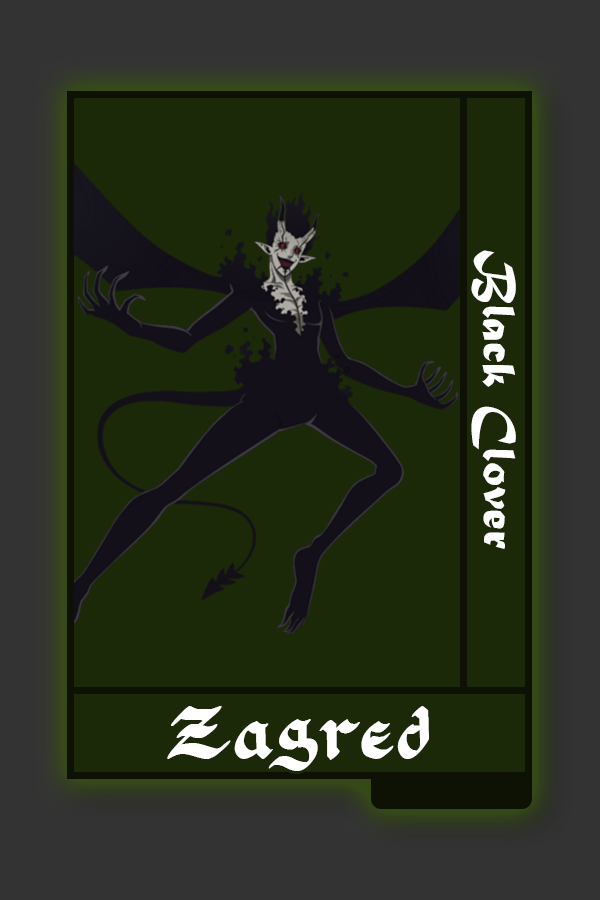
<style>
.page{position:relative;width:600px;height:900px;background:#1b2908}
.page>*{position:absolute;margin:0}
.t1{font:48.8px "MaturaMTScriptCapitals";color:#ffffff}
.t2{font:64.6px "FloranteatLaura";color:#ffffff}
</style>
<div class="page">
<p class="t1" style="left:471px;top:250px;width:45px;height:299px;rotate:90deg">Black Clover</p>
<p class="t2" style="left:167px;top:706px;width:262px;height:65px">Zagred</p>
</div>
